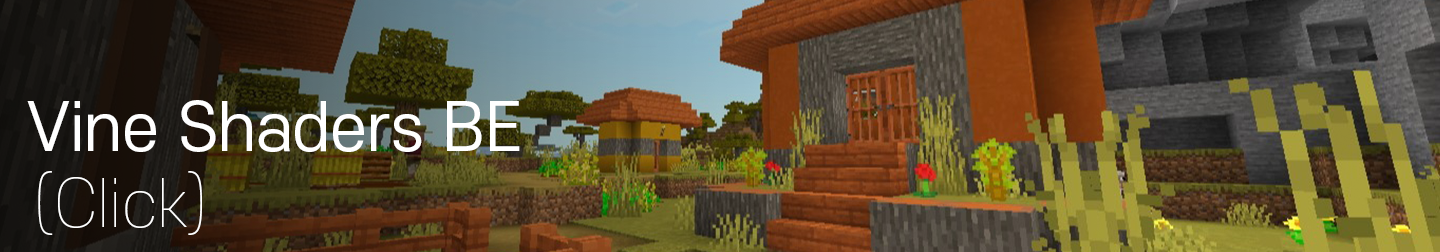
<style>
.page{position:relative;width:1440px;height:252px}
.page>*{position:absolute;margin:0}
.t1{font:64px "S-CoreDream-4Regular";color:#ffffff}
.t2{font:64px "S-CoreDream-1Thin";color:#ffffff}
</style>
<div class="page">
<p class="t1" style="left:27px;top:100px;width:493px;height:52px">Vine Shaders BE</p>
<p class="t2" style="left:38px;top:171px;width:164px;height:64px">(Click)</p>
</div>
